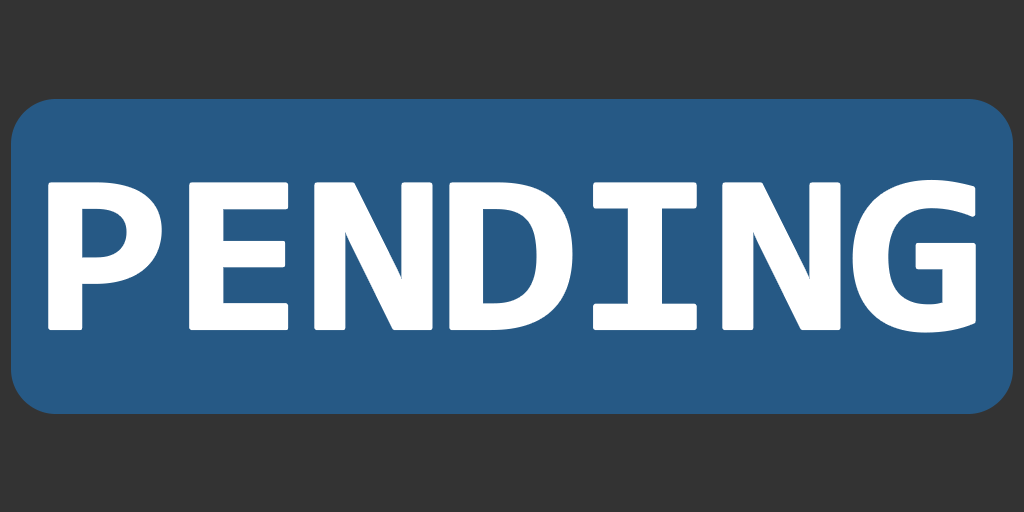
<style>
.page{position:relative;width:1024px;height:512px;background:#265985}
.page>*{position:absolute;margin:0}
.t1{font:225.1px "Consolas-Bold";color:#ffffff;scale:1.1 1}
</style>
<div class="page">
<p class="t1" style="left:50px;top:181px;width:924px;height:150px">PENDING</p>
</div>
